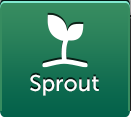
<style>
.page{position:relative;width:131px;height:117px}
.page>*{position:absolute;margin:0}
.t1{font:22.6px "MuseoSans-500";color:#ffffff}
</style>
<div class="page">
<p class="t1" style="left:30px;top:74px;width:69px;height:22px">Sprout</p>
</div>
